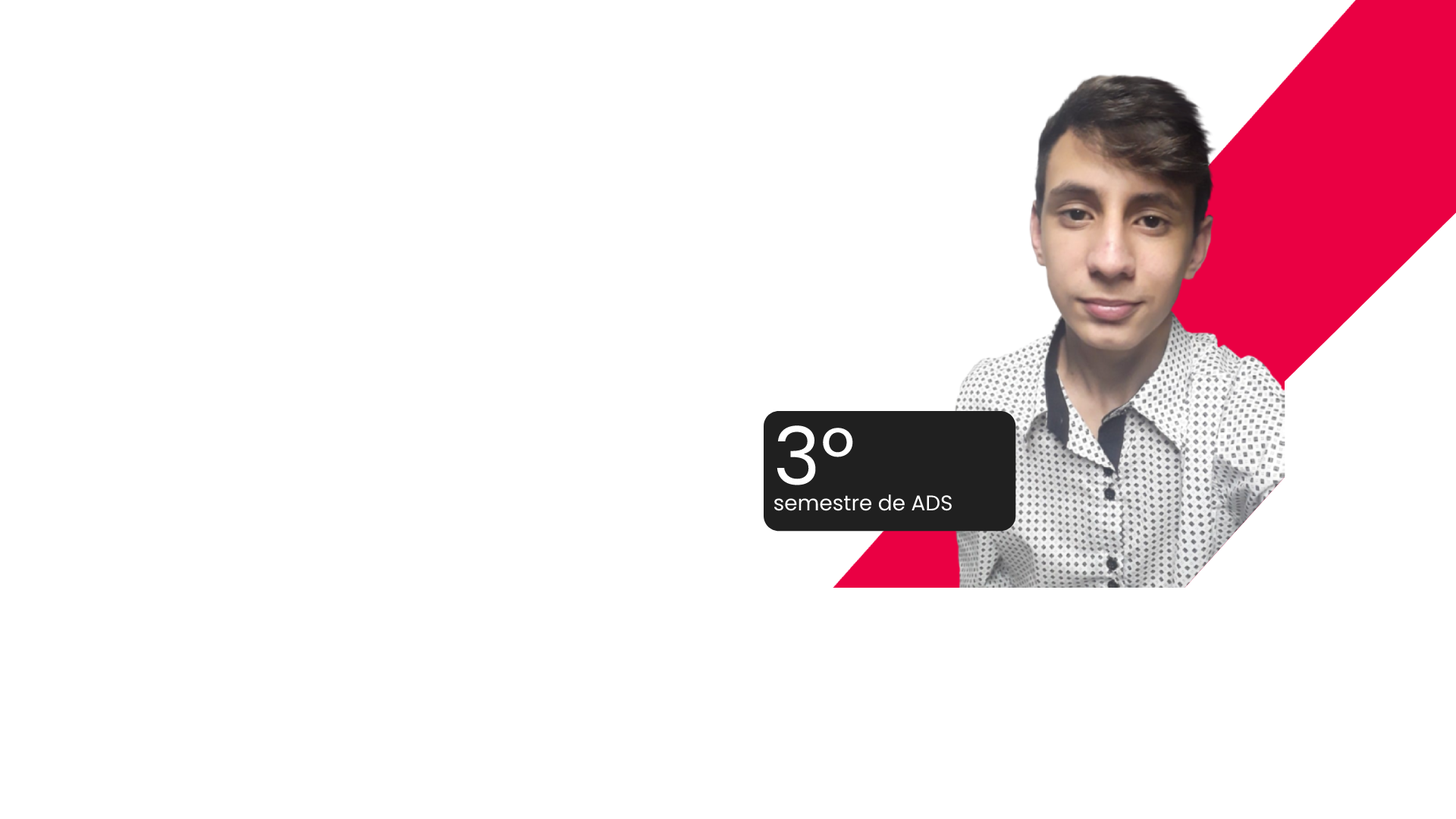
<style>
.page{position:relative;width:1456px;height:819px;background:#ffffff}
.page>*{position:absolute;margin:0}
.t1{font:21.2px "Poppins-Regular";color:#ffffff}
.t2{font:80px "Poppins-Regular";color:#ffffff}
</style>
<div class="page">
<p class="t1" style="left:774px;top:425px;width:178px;height:86px"><span class="t2">3º<br></span>semestre de ADS</p>
</div>
